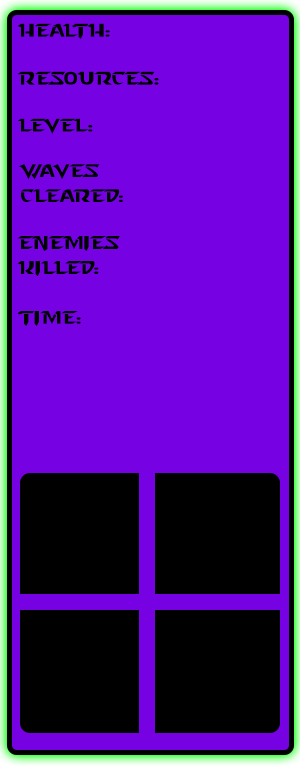
<style>
.page{position:relative;width:300px;height:770px;background:#7602e3}
.page>*{position:absolute;margin:0}
.t1{font:18px "StarcraftNormal";color:#000000}
.t2{font:18px/25px "StarcraftNormal";color:#000000}
</style>
<div class="page">
<p class="t1" style="left:17px;top:23px;width:93px;height:16px">Health:</p>
<p class="t1" style="left:17px;top:71px;width:142px;height:14px">Resources:</p>
<p class="t1" style="left:17px;top:118px;width:76px;height:16px">Level:</p>
<p class="t2" style="left:18px;top:164px;width:105px;height:38px">Waves Cleared:</p>
<p class="t2" style="left:17px;top:236px;width:103px;height:40px">Enemies <br>Killed:</p>
<p class="t1" style="left:17px;top:311px;width:64px;height:15px">Time:</p>
</div>
